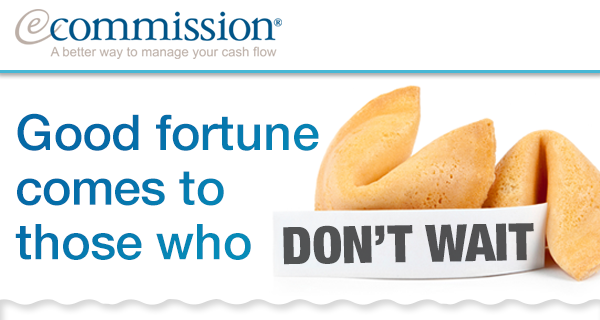
<style>
.page{position:relative;width:600px;height:320px;background:#ffffff}
.page>*{position:absolute;margin:0}
.t1{font:49.6px/54.7px "HelveticaNeue-Medium";color:#0676ad}
.t2{font:51.7px "HelveticaNeue-CondensedBlack";color:#515153;text-transform:uppercase;scale:1.04 1}
</style>
<div class="page">
<p class="t1" style="left:15px;top:113px;width:304px;height:147px">Good fortune<br>comes to<br>those who</p>
<p class="t2" style="left:283px;top:223px;width:251px;height:42px;rotate:-1deg">DON’t WAIT</p>
</div>
